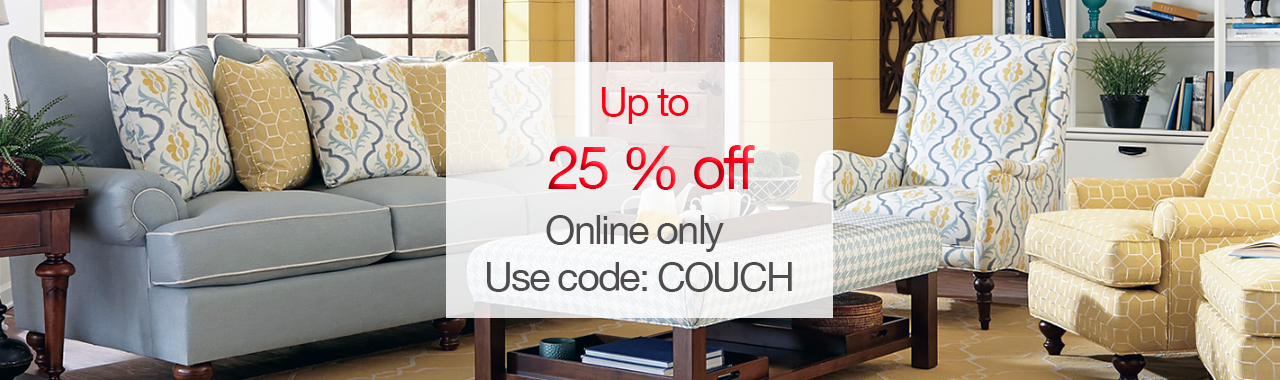
<style>
.page{position:relative;width:1280px;height:380px}
.page>*{position:absolute;margin:0}
.t1{font:40px "HelveticaNeue";letter-spacing:-0.05em;color:#fd0119}
.t2{font:60px "HelveticaNeue";letter-spacing:-0.05em}
.t3{font:40px/15.7px "HelveticaNeue";letter-spacing:-0.05em;color:#4e4c4c}
</style>
<div class="page">
<p class="t1" style="left:602px;top:87px;width:87px;height:37px">Up to</p>
<p class="t2" style="left:548px;top:145px;width:207px;height:45px">25 % off</p>
<p class="t3" style="left:487px;top:215px;width:305px;height:77px;text-align:center">Online only <br><br><br>Use code: COUCH</p>
</div>
